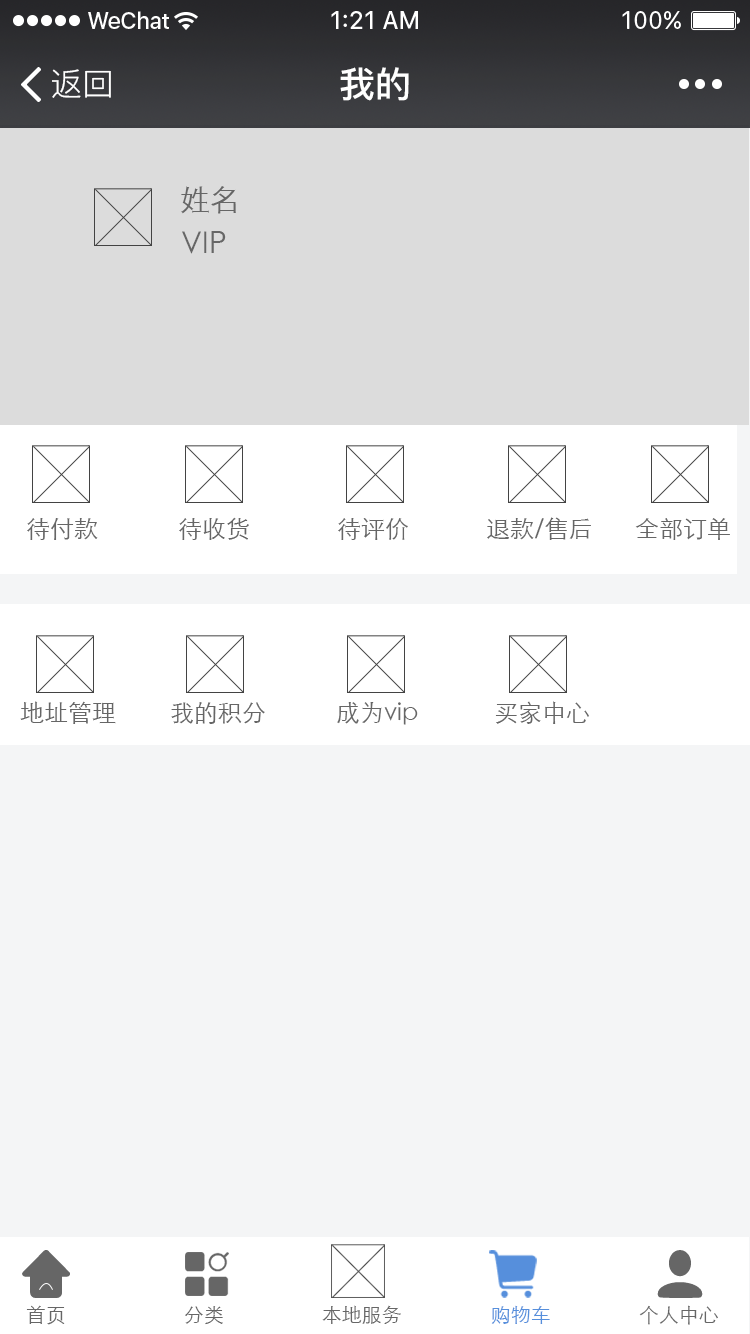
<style>
.page{position:relative;width:750px;height:1334px;background:#f4f5f6}
.page>*{position:absolute;margin:0}
.t1{font:32px "PingFang-SC-Regular";color:#ffffff}
.t2{font:36px "PingFang-SC-Bold";color:#ffffff}
.t3{font:30px "STXihei";color:#666666}
.t4{font:24px "STXihei";color:#666666}
.t5{font:20px "STXihei";color:#666666}
.t6{font:20px "STXihei";color:#568fdc}
</style>
<div class="page">
<p class="t1" style="left:52px;top:69px;width:59px;height:29px">返回</p>
<p class="t2" style="left:340px;top:67px;width:69px;height:34px">我的</p>
<p class="t3" style="left:181px;top:186px;width:55px;height:28px">姓名</p>
<p class="t3" style="left:182px;top:231px;width:44px;height:23px">VIP</p>
<p class="t4" style="left:27px;top:518px;width:71px;height:22px">待付款</p>
<p class="t4" style="left:179px;top:517px;width:70px;height:23px">待收货</p>
<p class="t4" style="left:338px;top:518px;width:70px;height:22px">待评价</p>
<p class="t4" style="left:487px;top:517px;width:104px;height:23px">退款/售后</p>
<p class="t4" style="left:635px;top:518px;width:95px;height:22px">全部订单</p>
<p class="t4" style="left:20px;top:701px;width:96px;height:23px">地址管理</p>
<p class="t4" style="left:171px;top:702px;width:94px;height:22px">我的积分</p>
<p class="t4" style="left:337px;top:702px;width:81px;height:23px">成为vip</p>
<p class="t4" style="left:495px;top:701px;width:94px;height:23px">买家中心</p>
<p class="t5" style="left:26px;top:1305px;width:39px;height:20px">首页</p>
<p class="t5" style="left:185px;top:1306px;width:38px;height:19px">分类</p>
<p class="t5" style="left:322px;top:1305px;width:79px;height:19px">本地服务</p>
<p class="t6" style="left:491px;top:1305px;width:59px;height:19px">购物车</p>
<p class="t5" style="left:639px;top:1305px;width:79px;height:20px">个人中心</p>
</div>
